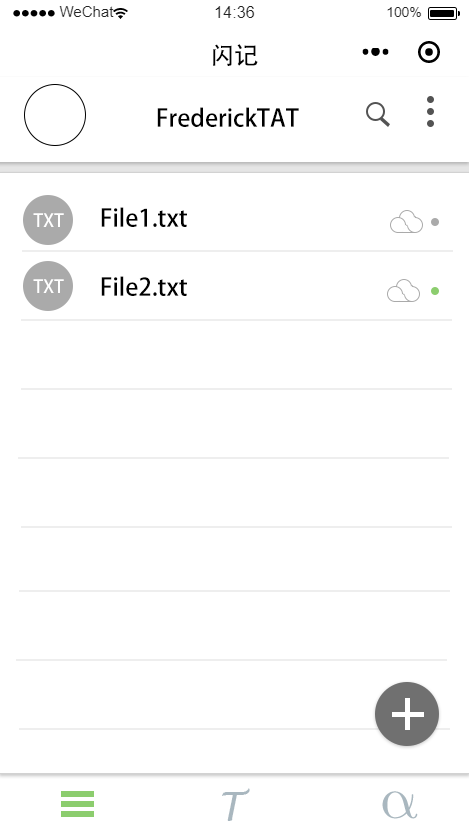
<style>
.page{position:relative;width:469px;height:833px;background:#ffffff}
.page>*{position:absolute;margin:0}
.t1{font:24px "AdobeHeitiStd-Regular";color:#000000}
.t2{font:40px "LucidaHandwriting-Italic";color:#a9b7bf}
.t3{font:60px "LatinModernMath-Regular";color:#a9b7bf}
</style>
<div class="page">
<p class="t1" style="left:213px;top:44px;width:45px;height:22px">闪记</p>
<p class="t1" style="left:157px;top:107px;width:142px;height:20px">FrederickTAT</p>
<p class="t1" style="left:101px;top:207px;width:86px;height:20px">File1.txt</p>
<p class="t1" style="left:101px;top:276px;width:86px;height:20px">File2.txt</p>
<p class="t2" style="left:222px;top:788px;width:28px;height:33px">T</p>
<p class="t3" style="left:382px;top:791px;width:36px;height:28px">α</p>
</div>
